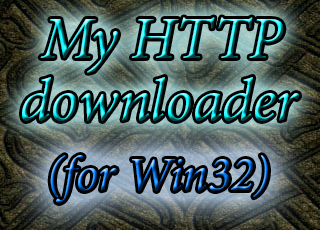
<style>
.page{position:relative;width:320px;height:230px}
.page>*{position:absolute;margin:0}
.t1{font:60px/62px "MinionPro-It"}
.t2{font:92px "MinionPro-It"}
</style>
<div class="page">
<p class="t1" style="left:22px;top:17px;width:277px;height:104px"><span class="t2"> </span>My HTTP<br>downloader</p>
</div>
